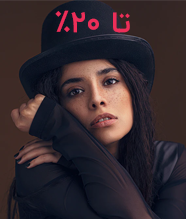
<style>
.page{position:relative;width:186px;height:219px}
.page>*{position:absolute;margin:0}
.t1{font:30px "IRANYekan-Bold";color:#ed2e59}
</style>
<div class="page">
<p class="t1" style="left:55px;top:10px;width:75px;height:23px">تا 20%</p>
</div>
